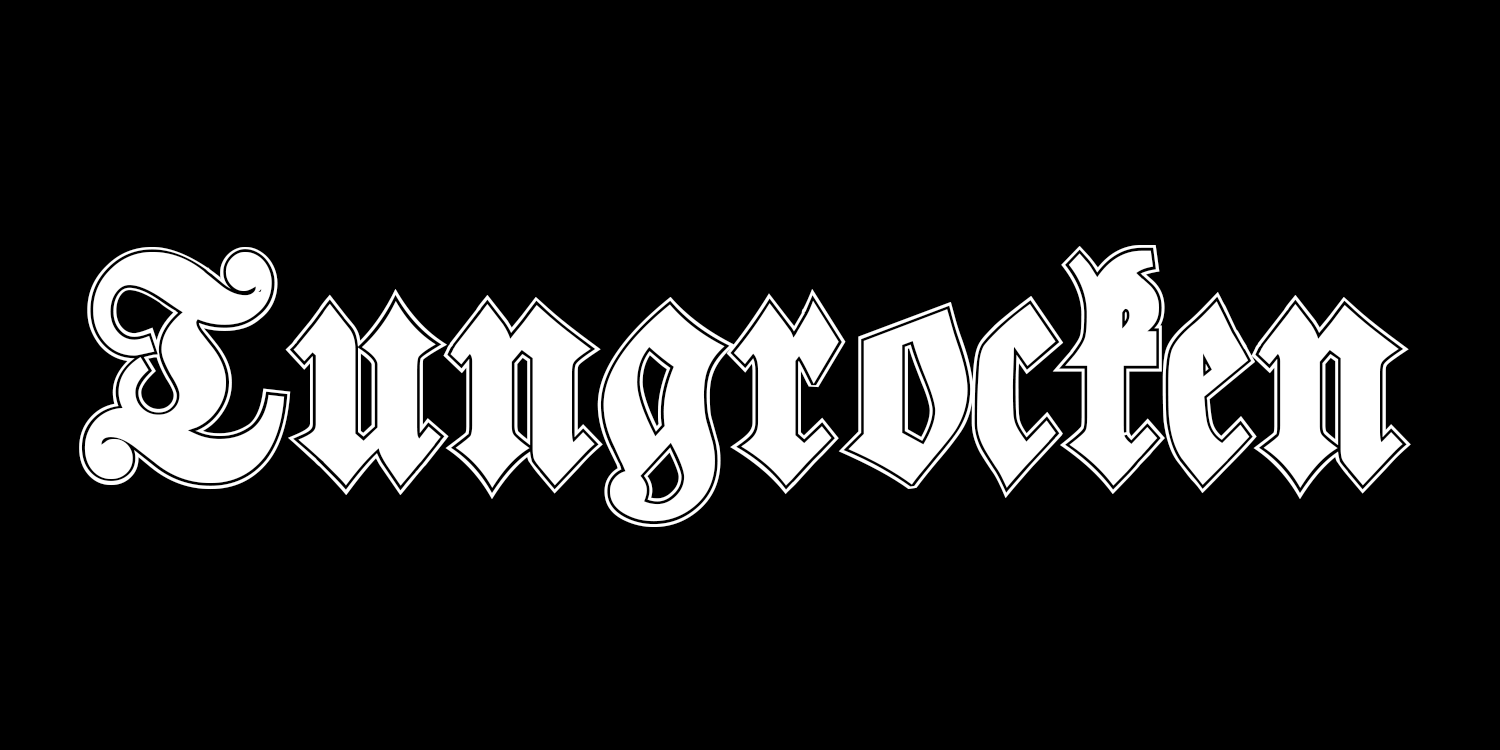
<style>
.page{position:relative;width:1500px;height:750px;background:#000000}
.page>*{position:absolute;margin:0}
.t1{font:303.7px "Walbaum-Fraktur-InlineBold";color:#ffffff}
</style>
<div class="page">
<p class="t1" style="left:79px;top:245px;width:1332px;height:282px">Tungrocken</p>
</div>
